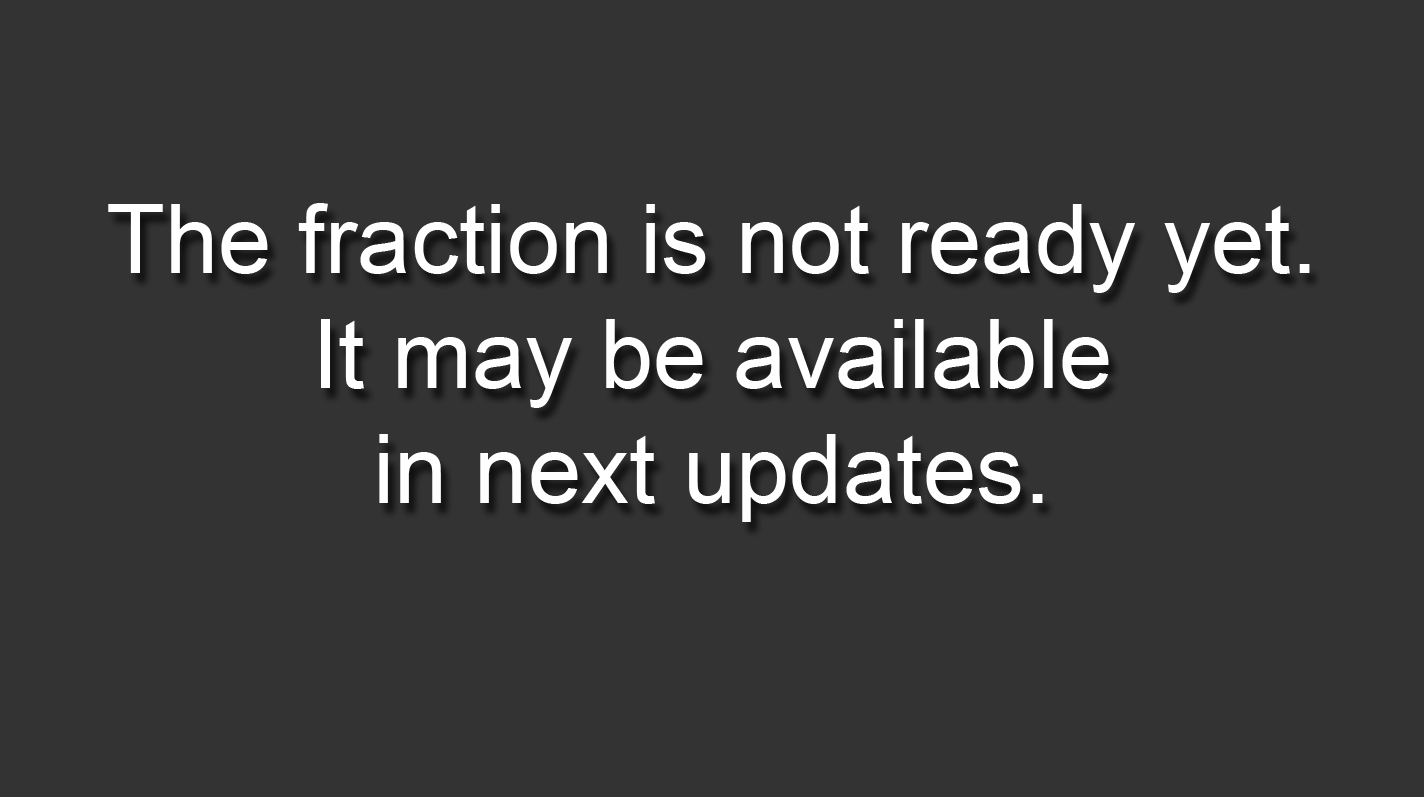
<style>
.page{position:relative;width:1424px;height:797px;background:#333333}
.page>*{position:absolute;margin:0}
.t1{font:96px "ArialMT";color:#ffffff}
</style>
<div class="page">
<p class="t1" style="left:108px;top:203px;width:1202px;height:319px;text-align:center">The fraction is not ready yet. <br>It may be available <br>in next updates.</p>
</div>
